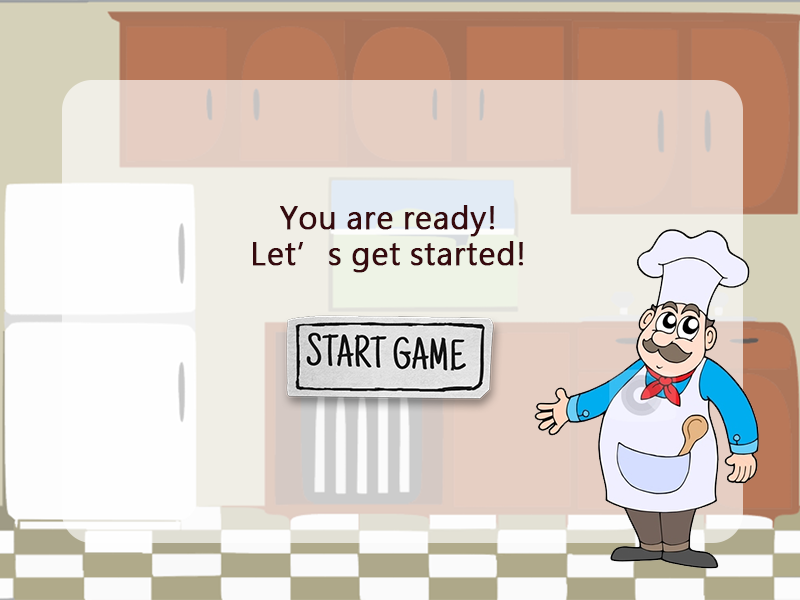
<style>
.page{position:relative;width:800px;height:600px}
.page>*{position:absolute;margin:0}
.t1{font:30px "MicrosoftJhengHeiRegular";letter-spacing:0.009em;color:#360a0e;font-weight:bold}
</style>
<div class="page">
<p class="t1" style="left:253px;top:205px;width:270px;height:68px;text-align:center">You are ready!<br>Let’s get started!</p>
</div>
